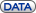
<style>
.page{position:relative;width:36px;height:13px}
.page>*{position:absolute;margin:0}
.t1{font:10px "Avenir-Roman";color:#003699;font-weight:bold;scale:1.06 1}
</style>
<div class="page">
<p class="t1" style="left:4px;top:3px;width:28px;height:8px">DATA</p>
</div>
